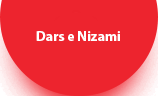
<style>
.page{position:relative;width:158px;height:96px;background:#ed242e}
.page>*{position:absolute;margin:0}
.t1{font:14px "MyriadPro-Bold";color:#ffffff}
</style>
<div class="page">
<p class="t1" style="left:36px;top:31px;width:84px;height:10px">Dars e Nizami</p>
</div>
